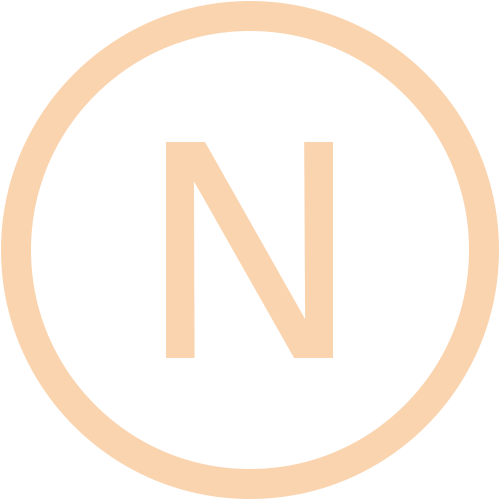
<style>
.page{position:relative;width:500px;height:500px;background:#ffffff}
.page>*{position:absolute;margin:0}
.t1{font:313.6px "Facit-Regular";color:#fad4af}
</style>
<div class="page">
<p class="t1" style="left:166px;top:142px;width:167px;height:216px">N</p>
</div>
